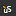
<style>
.page{position:relative;width:16px;height:16px;background:#333333}
.page>*{position:absolute;margin:0}
.t1{font:11px "Consolas";color:#ffffff}
.t2{font:7.6px "Consolas";color:#ffffff}
</style>
<div class="page">
<p class="t1" style="left:6px;top:6px;width:6px;height:6px">s</p>
<p class="t2" style="left:4px;top:9px;width:4px;height:4px">u</p>
</div>
